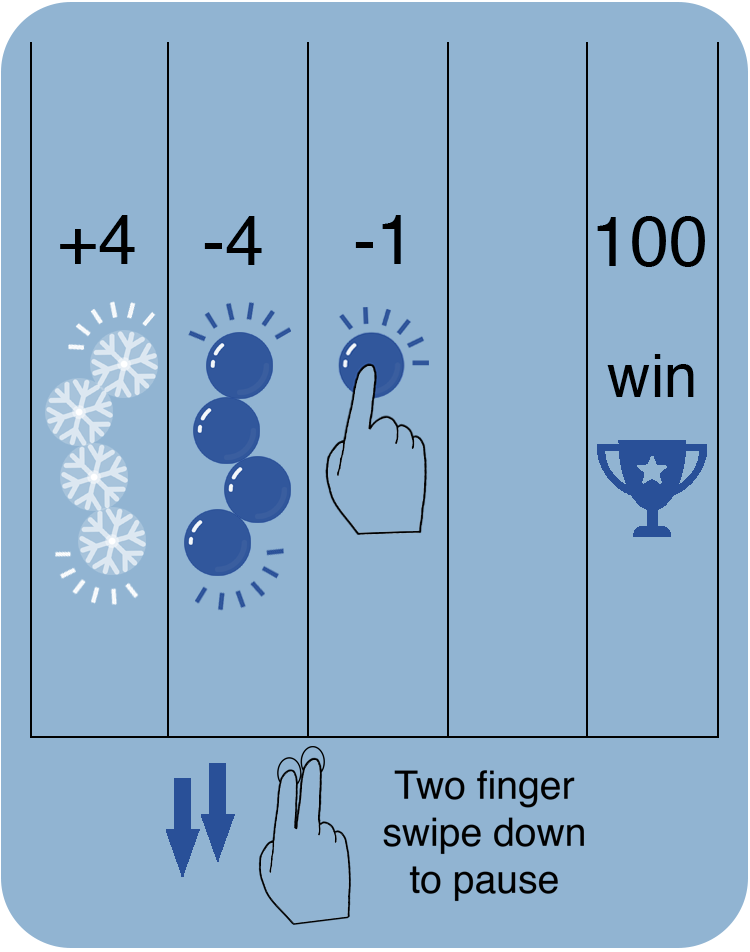
<style>
.page{position:relative;width:750px;height:952px;background:#91b4d2}
.page>*{position:absolute;margin:0}
.t1{font:70px "Helvetica";color:#000000}
.t2{font:60px "Helvetica";color:#000000}
</style>
<div class="page">
<p class="t1" style="left:60px;top:215px;width:75px;height:49px">+4</p>
<p class="t1" style="left:204px;top:216px;width:58px;height:49px">-4</p>
<p class="t1" style="left:355px;top:215px;width:46px;height:49px">-1</p>
<p class="t1" style="left:597px;top:216px;width:108px;height:51px">100</p>
<p class="t2" style="left:607px;top:354px;width:87px;height:43px">win</p>
</div>
